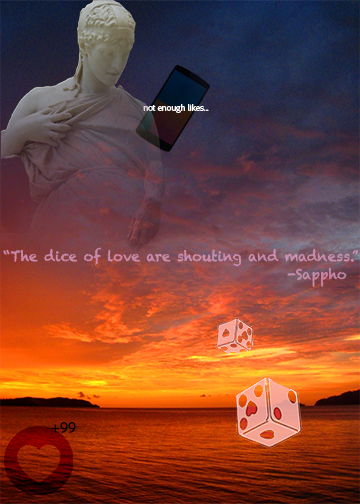
<style>
.page{position:relative;width:360px;height:504px}
.page>*{position:absolute;margin:0}
.t1{font:9px "AdobeClean-Regular";color:#ffffff}
.t2{font:14.1px "Chalkduster";color:#cc8faf;scale:0.95 1}
.t3{font:14.1px "Chalkduster";color:#c48aa9;scale:0.95 1}
.t4{font:16px "AdobeClean-Regular";color:#000000}
</style>
<div class="page">
<p class="t1" style="left:143px;top:104px;width:66px;height:9px">not enough likes...</p>
<p class="t2" style="left:3px;top:247px;width:356px;height:20px">“The dice of love are shouting and madness.”</p>
<p class="t3" style="left:287px;top:267px;width:60px;height:20px">-Sappho</p>
<p class="t4" style="left:51px;top:422px;width:25px;height:11px">+99</p>
</div>
